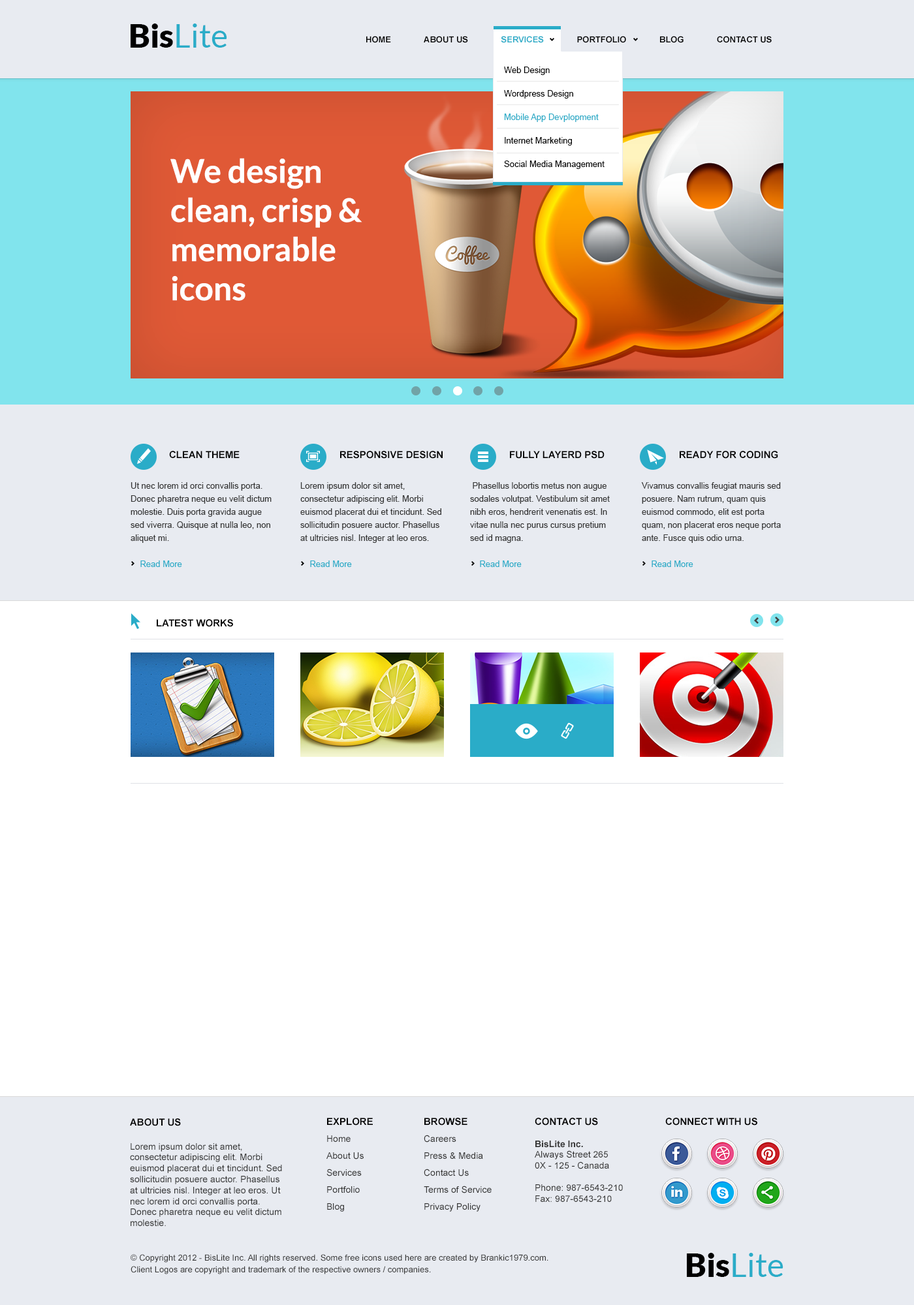
<style>
.page{position:relative;width:914px;height:1305px;background:#ffffff}
.page>*{position:absolute;margin:0}
.t1{font:32.6px "Lato-Regular";color:#2aacc8}
.t2{font:32.6px "Lato-Black";color:#000000}
.t3{font:8.5px "Arial-BoldMT";color:#000000;text-transform:uppercase}
.t4{font:8.5px "Arial-BoldMT";color:#2aacc8;text-transform:uppercase}
.t5{font:8.5px/23.5px "ArialMT";color:#000000}
.t6{font:8.5px/23.5px "ArialMT";color:#2aacc8}
.t7{font:32.6px "Lato-Bold";color:#ffffff}
.t8{font:9.8px "Arial-BoldMT";color:#000000;text-transform:uppercase}
.t9{font:8.5px/13.1px "ArialMT";color:#363636}
.t10{font:8.5px/13.1px "ArialMT";color:#2aacc8}
.t11{font:9.1px "ArialMT";color:#363636}
.t12{font:9.8px/13.1px "Arial-BoldMT";color:#000000;text-transform:uppercase}
.t13{font:9.1px/17px "ArialMT";color:#363636}
.t14{font:9.1px "Arial-BoldMT";color:#363636}
.t15{font:8.5px/11.7px "ArialMT";color:#363636}
</style>
<div class="page">
<p class="t1" style="left:131px;top:23px;width:96px;height:25px"><span class="t2">Bis</span>Lite</p>
<p class="t3" style="left:366px;top:36px;width:405px;height:7px">Home              About Us              <span class="t4">Services</span>              Portfolio              Blog              Contact Us</p>
<p class="t5" style="left:504px;top:67px;width:100px;height:102px">Web Design<br>Wordpress Design<br><span class="t6">Mobile App Devplopment<br></span>Internet Marketing<br>Social Media Management</p>
<p class="t7" style="left:170px;top:158px;width:192px;height:143px">We design clean, crisp &amp; memorable icons</p>
<p class="t8" style="left:169px;top:451px;width:70px;height:7px">Clean Theme</p>
<p class="t8" style="left:340px;top:451px;width:102px;height:8px">Responsive Design</p>
<p class="t8" style="left:510px;top:451px;width:94px;height:8px">Fully layerd PSD</p>
<p class="t8" style="left:679px;top:451px;width:99px;height:8px">Ready for coding</p>
<p class="t9" style="left:131px;top:482px;width:140px;height:85px">Ut nec lorem id orci convallis porta. Donec pharetra neque eu velit dictum molestie. Duis porta gravida augue sed viverra. Quisque at nulla leo, non aliquet mi. <br><br><span class="t10">    Read More</span></p>
<p class="t9" style="left:300px;top:482px;width:141px;height:85px">Lorem ipsum dolor sit amet, consectetur adipiscing elit. Morbi euismod placerat dui et tincidunt. Sed sollicitudin posuere auctor. Phasellus at ultricies nisl. Integer at leo eros.<br><br><span class="t10">    Read More</span></p>
<p class="t9" style="left:470px;top:482px;width:140px;height:85px">Phasellus lobortis metus non augue sodales volutpat. Vestibulum sit amet nibh eros, hendrerit venenatis est. In vitae nulla nec purus cursus pretium sed id magna. <br><br><span class="t10">    Read More</span></p>
<p class="t9" style="left:641px;top:482px;width:139px;height:85px">Vivamus convallis feugiat mauris sed posuere. Nam rutrum, quam quis euismod commodo, elit est porta quam, non placerat eros neque porta ante. Fusce quis odio urna. <br><br><span class="t10">    Read More</span></p>
<p class="t8" style="left:157px;top:619px;width:76px;height:8px">latest works</p>
<p class="t11" style="left:130px;top:1119px;width:152px;height:107px"><span class="t12">About us<br><br></span>Lorem ipsum dolor sit amet, consectetur adipiscing elit. Morbi euismod placerat dui et tincidunt. Sed sollicitudin posuere auctor. Phasellus at ultricies nisl. Integer at leo eros. Ut nec lorem id orci convallis porta. Donec pharetra neque eu velit dictum molestie.</p>
<p class="t13" style="left:326px;top:1118px;width:47px;height:94px"><span class="t12">Explore<br></span>Home<br>About Us<br>Services<br>Portfolio<br>Blog</p>
<p class="t13" style="left:424px;top:1118px;width:67px;height:94px"><span class="t12">Browse<br></span>Careers<br>Press &amp; Media<br>Contact Us<br>Terms of Service<br>Privacy Policy</p>
<p class="t11" style="left:534px;top:1118px;width:89px;height:84px"><span class="t8">contact us<br><br></span><span class="t14">BisLite Inc.<br></span>Always Street 265<br>0X - 125 - Canada<br><br>Phone: 987-6543-210<br>Fax: 987-6543-210</p>
<p class="t8" style="left:665px;top:1118px;width:92px;height:8px">connect with us</p>
<p class="t1" style="left:687px;top:1253px;width:96px;height:24px"><span class="t2">Bis</span>Lite</p>
<p class="t15" style="left:131px;top:1254px;width:417px;height:21px">© Copyright 2012 - BisLite Inc. All rights reserved. Some free icons used here are created by Brankic1979.com. <br>Client Logos are copyright and trademark of the respective owners / companies.</p>
</div>
